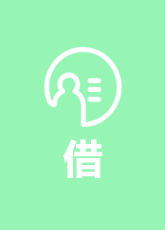
<style>
.page{position:relative;width:165px;height:230px;background:#96f4b5}
.page>*{position:absolute;margin:0}
.t1{font:40px "MicrosoftYaHei-Bold";color:#ffffff}
</style>
<div class="page">
<p class="t1" style="left:63px;top:139px;width:40px;height:39px">借</p>
</div>
